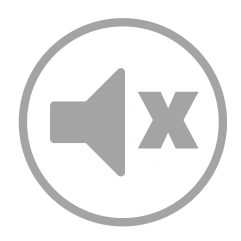
<style>
.page{position:relative;width:241px;height:241px;background:#ffffff}
.page>*{position:absolute;margin:0}
.t1{font:115.4px "FrontPageNews1.1";color:#a4a4a4;scale:1.34 1}
</style>
<div class="page">
<p class="t1" style="left:138px;top:91px;width:61px;height:58px">x</p>
</div>
